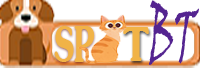
<style>
.page{position:relative;width:200px;height:68px;background:#ffffff}
.page>*{position:absolute;margin:0}
.t1{font:77.3px "VinerHandITC";color:#542490;scale:0.45 1}
.t2{font:49.1px "VNI-Souvir-Bold";color:#f1b347;scale:0.61 1}
.t3{font:47.4px "VNI-Souvir-Bold";color:#f1b347;scale:0.82 1}
</style>
<div class="page">
<p class="t1" style="left:149px;top:0px;width:50px;height:66px;rotate:4deg">BT</p>
<p class="t2" style="left:54px;top:26px;width:41px;height:36px">SP</p>
<p class="t3" style="left:123px;top:27px;width:26px;height:34px">T</p>
</div>
